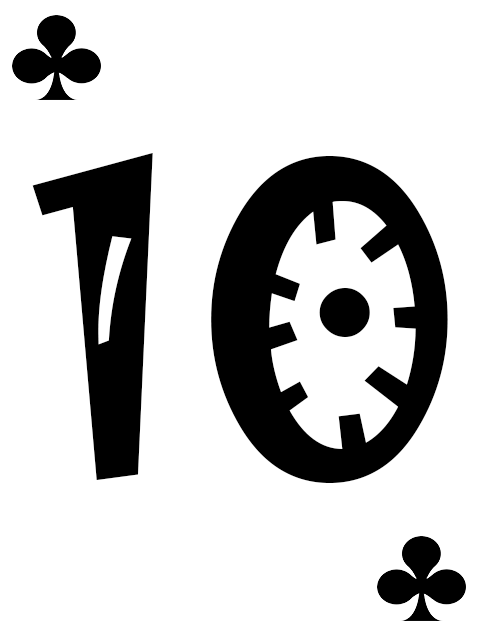
<style>
.page{position:relative;width:480px;height:640px;background:#ffffff}
.page>*{position:absolute;margin:0}
.t1{font:386.3px "Jokerman-Regular";color:#000000}
</style>
<div class="page">
<p class="t1" style="left:32px;top:153px;width:416px;height:330px">10</p>
</div>
